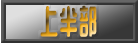
<style>
.page{position:relative;width:140px;height:45px}
.page>*{position:absolute;margin:0}
.t1{font:36px "JetLink-MediumRoundArt";scale:0.54 1}
</style>
<div class="page">
<p class="t1" style="left:40px;top:5px;width:57px;height:32px">上半部</p>
</div>
